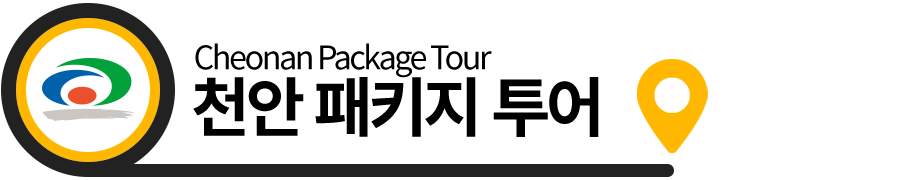
<style>
.page{position:relative;width:900px;height:180px;background:#ffffff}
.page>*{position:absolute;margin:0}
.t1{font:32.4px "NotoSansCJKkr-Regular";letter-spacing:-0.075em;color:#000000}
.t2{font:64.7px "NotoSansCJKkr-Bold";letter-spacing:-0.075em;color:#000000}
</style>
<div class="page">
<p class="t1" style="left:195px;top:43px;width:297px;height:35px">Cheonan Package Tour</p>
<p class="t2" style="left:193px;top:77px;width:406px;height:60px">천안 패키지 투어</p>
</div>
